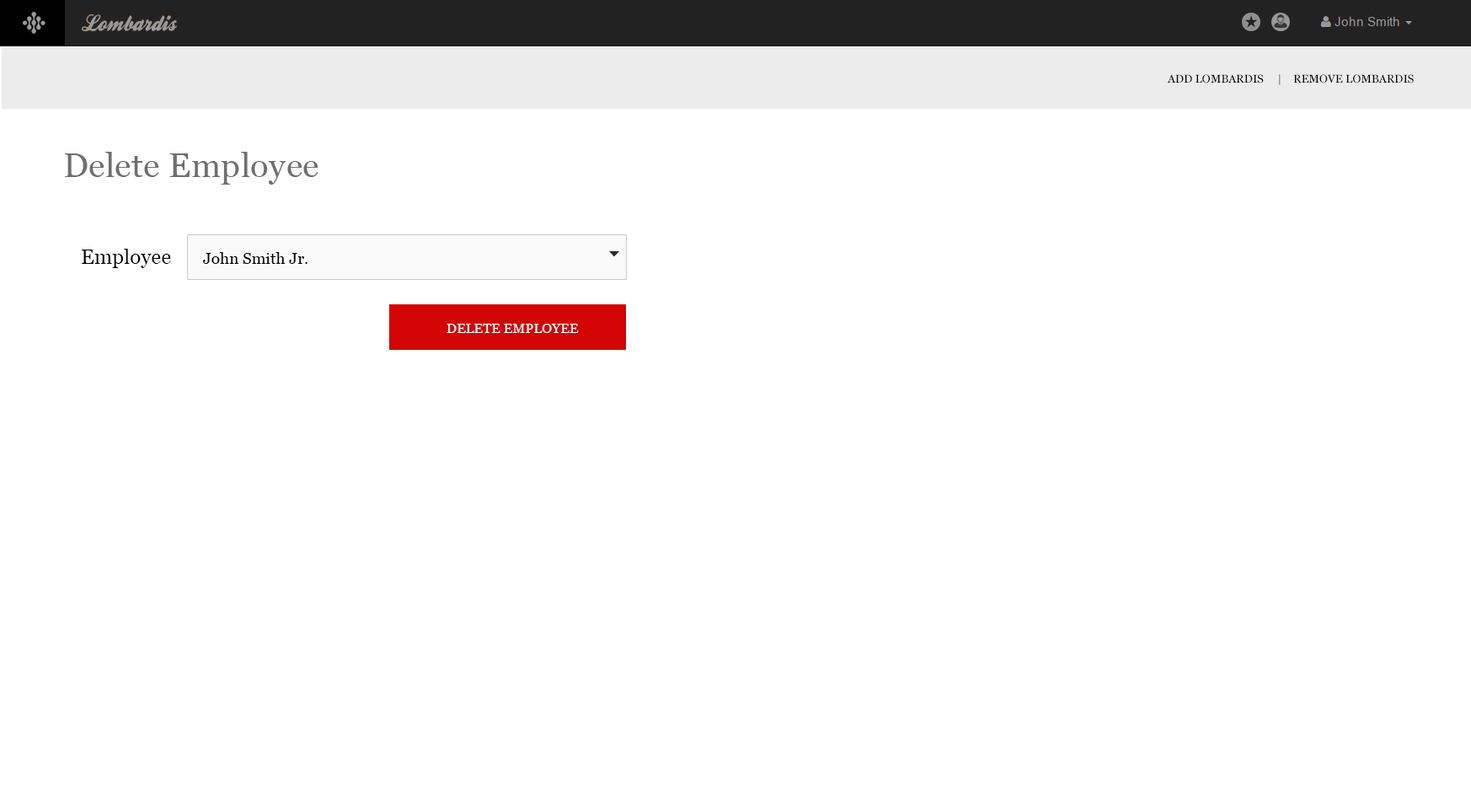
<style>
.page{position:relative;width:1471px;height:811px;background:#ffffff}
.page>*{position:absolute;margin:0}
.t1{font:23.4px "BallparkWeiner";color:#999999;scale:0.96 1}
.t2{font:11.2px "Georgia";letter-spacing:0.01em;color:#000000}
.t3{font:33.7px "Georgia";letter-spacing:0.01em;color:#6e6e6e}
.t4{font:20.2px "Georgia";letter-spacing:0.01em;color:#000000}
.t5{font:15.7px "Georgia";letter-spacing:0.01em;color:#000000}
.t6{font:13.5px "Georgia";letter-spacing:0.01em;color:#ffffff}
</style>
<div class="page">
<p class="t1" style="left:82px;top:14px;width:95px;height:17px">Lombardis</p>
<p class="t2" style="left:1167px;top:74px;width:247px;height:11px">ADD LOMBARDIS     |    REMOVE LOMBARDIS</p>
<p class="t3" style="left:64px;top:152px;width:254px;height:33px">Delete Employee</p>
<p class="t4" style="left:82px;top:249px;width:89px;height:19px">Employee</p>
<p class="t5" style="left:203px;top:252px;width:105px;height:12px">John Smith Jr.</p>
<p class="t6" style="left:447px;top:324px;width:132px;height:9px">DELETE EMPLOYEE</p>
</div>
